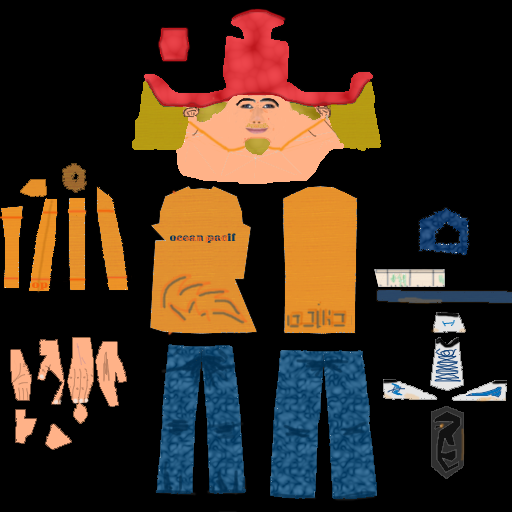
<style>
.page{position:relative;width:512px;height:512px;background:#000000}
.page>*{position:absolute;margin:0}
.t1{font:8.2px "Marlboro";color:#f26822;scale:1.73 1}
.t2{font:11px "Marlboro";color:#f2640e;scale:1.96 1}
</style>
<div class="page">
<p class="t1" style="left:175px;top:235px;width:53px;height:8px">ocean pacif</p>
<p class="t2" style="left:32px;top:282px;width:16px;height:8px">op</p>
</div>
